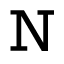
<style>
.page{position:relative;width:64px;height:64px;background:#ffffff}
.page>*{position:absolute;margin:0}
.t1{font:71.8px "Rokkitt";color:#000000}
</style>
<div class="page">
<p class="t1" style="left:10px;top:10px;width:44px;height:41px">N</p>
</div>
